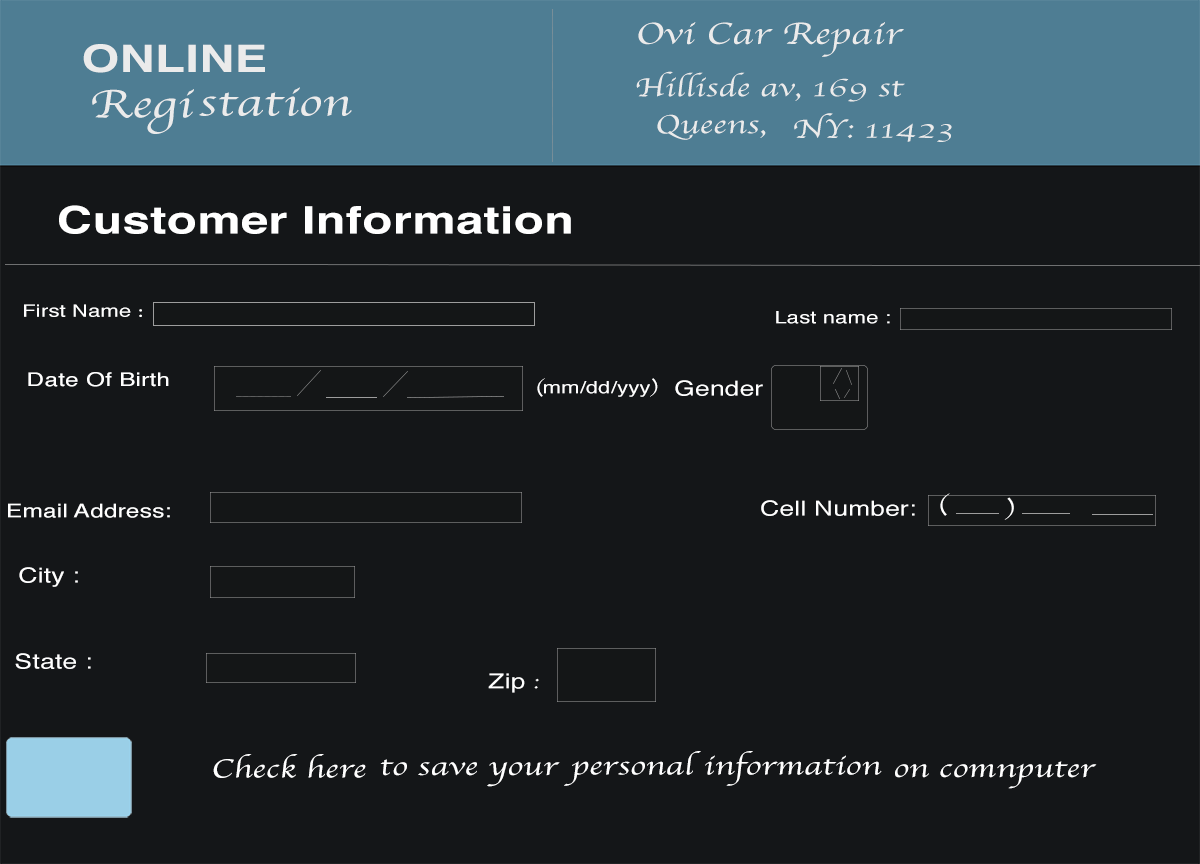
<style>
.page{position:relative;width:1200px;height:864px;background:#141618}
.page>*{position:absolute;margin:0}
.t1{font:31.5px "Apple-Chancery";letter-spacing:0.01em;color:#ebebeb;scale:1.29 1}
.t2{font:37.8px "Helvetica-Bold";letter-spacing:0.01em;color:#ebebeb;text-transform:uppercase;scale:1.29 1}
.t3{font:27.2px "Apple-Chancery";letter-spacing:0.01em;color:#ebebeb;scale:1.29 1}
.t4{font:40.8px "Apple-Chancery";letter-spacing:0.01em;color:#ebebeb;scale:1.29 1}
.t5{font:37.8px "Helvetica-Bold";letter-spacing:0.01em;color:#ffffff;scale:1.29 1}
.t6{font:17px "Helvetica";letter-spacing:0.01em;color:#ffffff;scale:1.29 1}
.t7{font:17px "AmericanTypewriter";letter-spacing:0.01em;color:#ffffff;scale:1.29 1}
.t8{font:18.9px "Helvetica";letter-spacing:0.01em;color:#ffffff;scale:1.29 1}
.t9{font:17px "Apple-Chancery";letter-spacing:0.01em;color:#ffffff;scale:1.29 1}
.t10{font:20.4px "Helvetica";letter-spacing:0.01em;color:#ffffff;scale:1.29 1}
.t11{font:20.4px "Apple-Chancery";letter-spacing:0.01em;color:#ffffff;scale:1.29 1}
.t12{font:27.2px "Apple-Chancery";letter-spacing:0.01em;color:#ffffff;scale:1.29 1}
</style>
<div class="page">
<p class="t1" style="left:638px;top:22px;width:266px;height:35px">Ovi Car Repair</p>
<p class="t2" style="left:83px;top:44px;width:182px;height:29px">online</p>
<p class="t3" style="left:636px;top:71px;width:269px;height:31px">Hillisde av, 169 st</p>
<p class="t4" style="left:92px;top:89px;width:102px;height:45px">Regi</p>
<p class="t4" style="left:199px;top:87px;width:153px;height:29px">station</p>
<p class="t3" style="left:794px;top:113px;width:158px;height:29px">NY: 11423</p>
<p class="t3" style="left:657px;top:114px;width:109px;height:26px">Queens,</p>
<p class="t5" style="left:59px;top:205px;width:512px;height:29px">Customer Information</p>
<p class="t6" style="left:24px;top:304px;width:118px;height:13px">First Name <span class="t7">:</span></p>
<p class="t6" style="left:776px;top:311px;width:114px;height:13px">Last name :</p>
<p class="t8" style="left:28px;top:372px;width:141px;height:15px">Date Of Birth</p>
<p class="t6" style="left:537px;top:378px;width:121px;height:19px"><span class="t9">(</span>mm/dd/yyy<span class="t9">)</span></p>
<p class="t10" style="left:675px;top:380px;width:102px;height:16px">Gender :</p>
<p class="t11" style="left:940px;top:493px;width:10px;height:23px">(</p>
<p class="t11" style="left:1004px;top:497px;width:10px;height:23px">)</p>
<p class="t8" style="left:8px;top:503px;width:162px;height:15px">Email Address:</p>
<p class="t10" style="left:761px;top:500px;width:154px;height:16px">Cell Number:</p>
<p class="t10" style="left:19px;top:567px;width:59px;height:20px">City :</p>
<p class="t10" style="left:15px;top:653px;width:76px;height:16px">State :</p>
<p class="t10" style="left:488px;top:673px;width:51px;height:20px">Zip <span class="t11">:</span></p>
<p class="t12" style="left:213px;top:754px;width:153px;height:24px">Check here</p>
<p class="t12" style="left:380px;top:759px;width:180px;height:28px">to save your</p>
<p class="t12" style="left:564px;top:751px;width:318px;height:35px">personal information</p>
<p class="t12" style="left:895px;top:761px;width:202px;height:28px">on comnputer</p>
</div>
